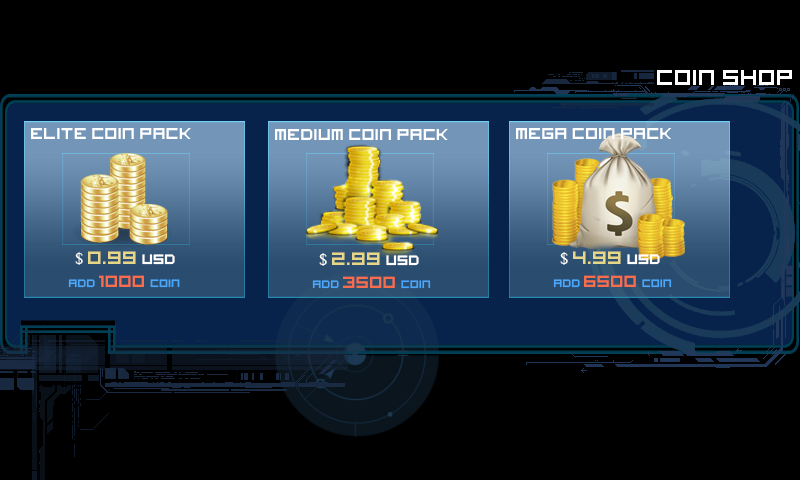
<style>
.page{position:relative;width:800px;height:480px;background:#000000}
.page>*{position:absolute;margin:0}
.t1{font:24px "imagine-font";color:#ffffff}
.t2{font:17.5px "imagine-font";color:#ffffff}
.t3{font:20px "imagine-font";color:#e7d687}
.t4{font:17.5px "IskoolaPota";color:#ffffff}
.t5{font:15px "imagine-font";color:#ffffff}
.t6{font:18px "imagine-font";color:#f96d4c}
.t7{font:12px "imagine-font";color:#4ca6f9}
</style>
<div class="page">
<p class="t1" style="left:657px;top:70px;width:135px;height:15px">COIN SHOP</p>
<p class="t2" style="left:31px;top:128px;width:160px;height:11px">elite COIN PACK</p>
<p class="t2" style="left:275px;top:129px;width:173px;height:11px">MEDIUM COIN PACK</p>
<p class="t2" style="left:516px;top:128px;width:156px;height:11px">MEGA COIN PACK</p>
<p class="t3" style="left:75px;top:251px;width:100px;height:14px"><span class="t4">$ </span>0.99 <span class="t5">USD</span></p>
<p class="t3" style="left:319px;top:252px;width:100px;height:14px"><span class="t4">$ </span>2.99 <span class="t5">USD</span></p>
<p class="t3" style="left:560px;top:251px;width:100px;height:14px"><span class="t4">$ </span>4.99 <span class="t5">USD</span></p>
<p class="t6" style="left:68px;top:275px;width:112px;height:13px"><span class="t7">add </span>1000 <span class="t7">coin</span></p>
<p class="t6" style="left:312px;top:276px;width:119px;height:13px"><span class="t7">add </span>3500 <span class="t7">coin</span></p>
<p class="t6" style="left:553px;top:275px;width:119px;height:13px"><span class="t7">add </span>6500 <span class="t7">coin</span></p>
</div>
